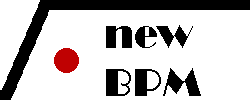
<style>
.page{position:relative;width:250px;height:100px;background:#ffffff}
.page>*{position:absolute;margin:0}
.t1{font:40px "Broadway";color:#000000}
</style>
<div class="page">
<p class="t1" style="left:106px;top:25px;width:95px;height:71px">new <br>BPM</p>
</div>
